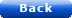
<style>
.page{position:relative;width:72px;height:18px}
.page>*{position:absolute;margin:0}
.t1{font:11px "Verdana-Bold";letter-spacing:0.1em;color:#ffffff}
</style>
<div class="page">
<p class="t1" style="left:20px;top:3px;width:32px;height:9px">Back</p>
</div>
